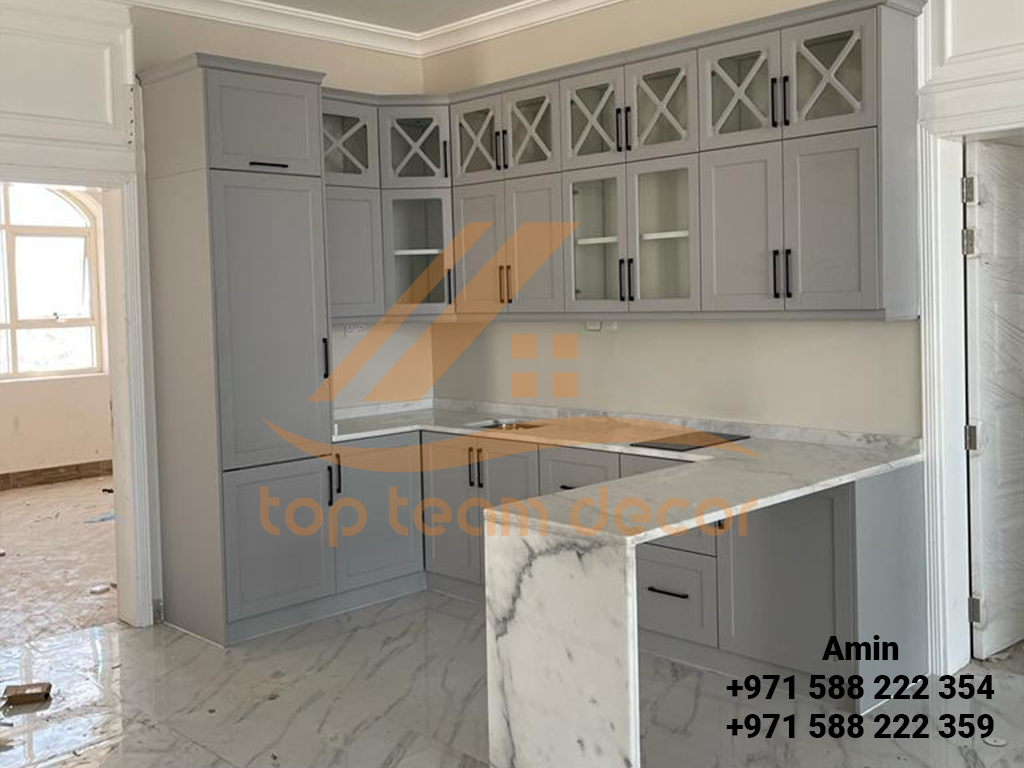
<style>
.page{position:relative;width:1024px;height:768px}
.page>*{position:absolute;margin:0}
.t1{font:32.7px "Roboto-Black";color:#000000}
</style>
<div class="page">
<p class="t1" style="left:726px;top:635px;width:269px;height:103px;text-align:center">Amin<br>+971 588 222 354<br>+971 588 222 359</p>
</div>
